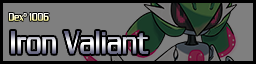
<style>
.page{position:relative;width:256px;height:64px;background:#7f7f7f}
.page>*{position:absolute;margin:0}
.t1{font:12px "ChaneyThinNormal"}
.t2{font:36px "ChaneyThinNormal"}
</style>
<div class="page">
<p class="t1" style="left:8px;top:13px;width:41px;height:8px">Dexº 1006</p>
<p class="t2" style="left:10px;top:31px;width:139px;height:23px">Iron Valiant</p>
</div>
